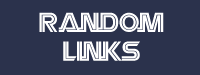
<style>
.page{position:relative;width:200px;height:75px;background:#2b324c}
.page>*{position:absolute;margin:0}
.t1{font:24px "Battlestar";color:#ffffff}
</style>
<div class="page">
<p class="t1" style="left:39px;top:12px;width:125px;height:49px;text-align:center">Random<br>Links</p>
</div>
